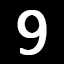
<style>
.page{position:relative;width:64px;height:64px;background:#000000}
.page>*{position:absolute;margin:0}
.t1{font:56px "MicrosoftYaHei";letter-spacing:0.075em;color:#ffffff;font-weight:bold}
</style>
<div class="page">
<p class="t1" style="left:17px;top:10px;width:30px;height:45px">9</p>
</div>
